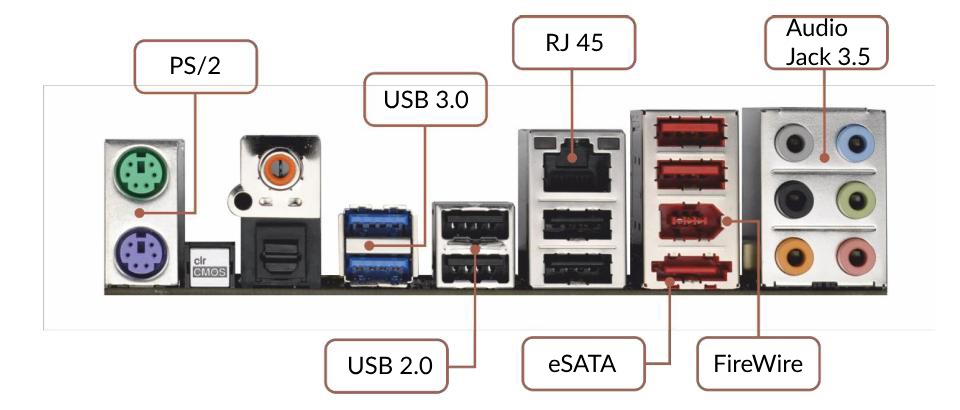
<style>
.page{position:relative;width:960px;height:410px;background:#ffffff}
.page>*{position:absolute;margin:0}
.t1{font:24px "Lato-Regular";color:#000000}
</style>
<div class="page">
<p class="t1" style="left:786px;top:18px;width:84px;height:48px">Audio <br>Jack 3.5</p>
<p class="t1" style="left:547px;top:33px;width:56px;height:19px">RJ 45</p>
<p class="t1" style="left:171px;top:56px;width:49px;height:20px">PS/2</p>
<p class="t1" style="left:384px;top:90px;width:85px;height:19px">USB 3.0</p>
<p class="t1" style="left:348px;top:356px;width:85px;height:19px">USB 2.0</p>
<p class="t1" style="left:548px;top:354px;width:69px;height:19px">eSATA</p>
<p class="t1" style="left:715px;top:354px;width:88px;height:19px">FireWire</p>
</div>
